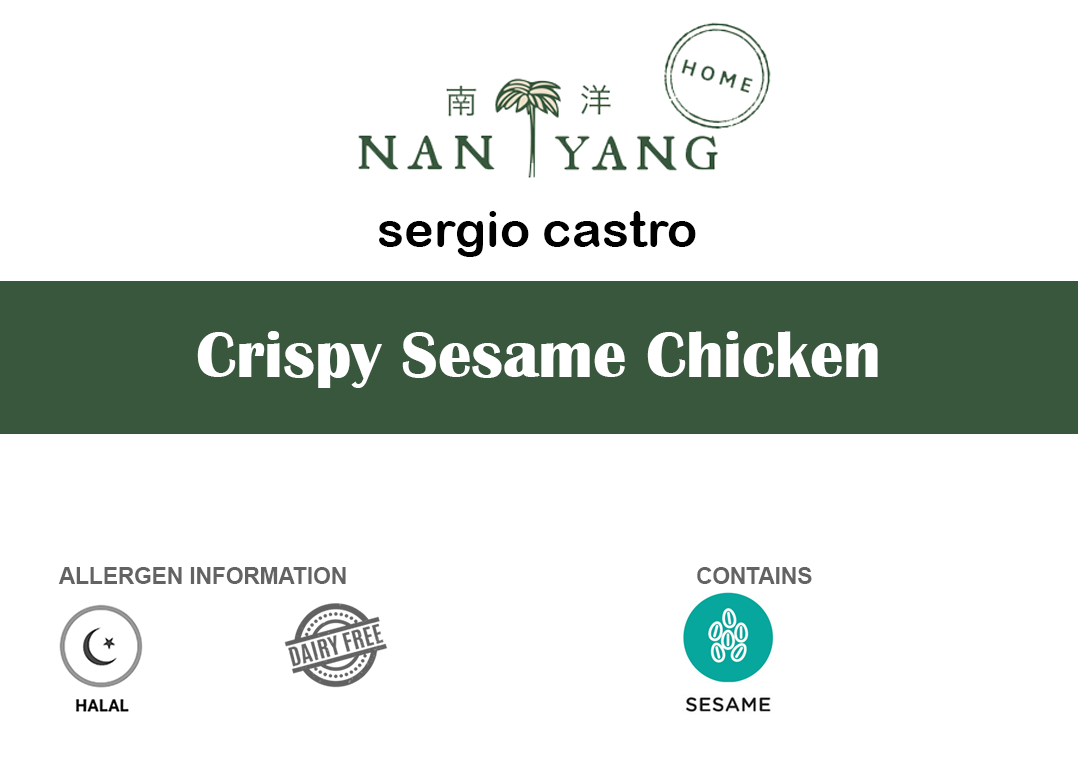
<style>
.page{position:relative;width:1078px;height:768px;background:#ffffff}
.page>*{position:absolute;margin:0}
.t1{font:50px "ArialRoundedMTBold";color:#000000}
.t2{font:66.7px "BritannicBold";color:#ffffff}
.t3{font:22.6px "Arial-BoldMT";color:#636363}
</style>
<div class="page">
<p class="t1" style="left:379px;top:211px;width:317px;height:46px">sergio castro</p>
<p class="t2" style="left:197px;top:331px;width:681px;height:57px">Crispy Sesame Chicken</p>
<p class="t3" style="left:58px;top:567px;width:288px;height:17px">ALLERGEN INFORMATION</p>
<p class="t3" style="left:697px;top:567px;width:115px;height:17px">CONTAINS</p>
</div>
